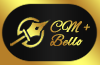
<style>
.page{position:relative;width:100px;height:65px}
.page>*{position:absolute;margin:0}
.t1{font:16px/14px "AlexBrush-Regular";letter-spacing:0.02em;font-weight:bold;scale:0.95 1}
</style>
<div class="page">
<p class="t1" style="left:50px;top:20px;width:40px;height:26px">CM +<br>Bello</p>
</div>
